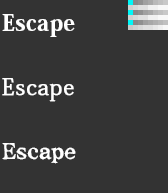
<style>
.page{position:relative;width:168px;height:193px;background:#333333}
.page>*{position:absolute;margin:0}
.t1{font:22px/64px "KozMinPro-Heavy";letter-spacing:0.022em;color:#ffffff}
.t2{font:22px/64px "AdobeFangsongStd-Regular";letter-spacing:0.028em;color:#ffffff;font-weight:bold}
.t3{font:22px/64px "ComicMysteryStd-DB";letter-spacing:-0.006em;color:#ffffff}
</style>
<div class="page">
<p class="t1" style="left:2px;top:14px;width:74px;height:150px">Escape<br><span class="t2">Escape<br></span><span class="t3">Escape</span></p>
</div>
